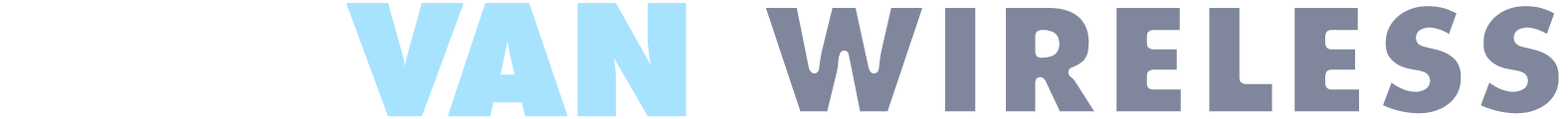
<style>
.page{position:relative;width:1568px;height:119px;background:#ffffff}
.page>*{position:absolute;margin:0}
.t1{font:149.2px "Futura-ExtraBold";color:#010000;font-weight:bold;scale:0.95 1}
.t2{font:149.2px "Futura-ExtraBold";color:#ffffff;font-weight:bold;scale:0.95 1}
.t3{font:149.2px "Futura-ExtraBold";color:#a7e3ff;font-weight:bold;scale:0.95 1}
.t4{font:149.2px "Futura-ExtraBold";color:#010f3c;font-weight:bold;scale:0.95 1}
</style>
<div class="page">
<p class="t1" style="left:2px;top:1px;width:1562px;height:118px"><span class="t2">JAM</span><span class="t3">VAN </span>WIRELESS</p>
<p class="t4" style="left:2px;top:1px;width:1562px;height:118px"><span class="t2">JAM</span><span class="t3">VAN </span>WIRELESS</p>
</div>
